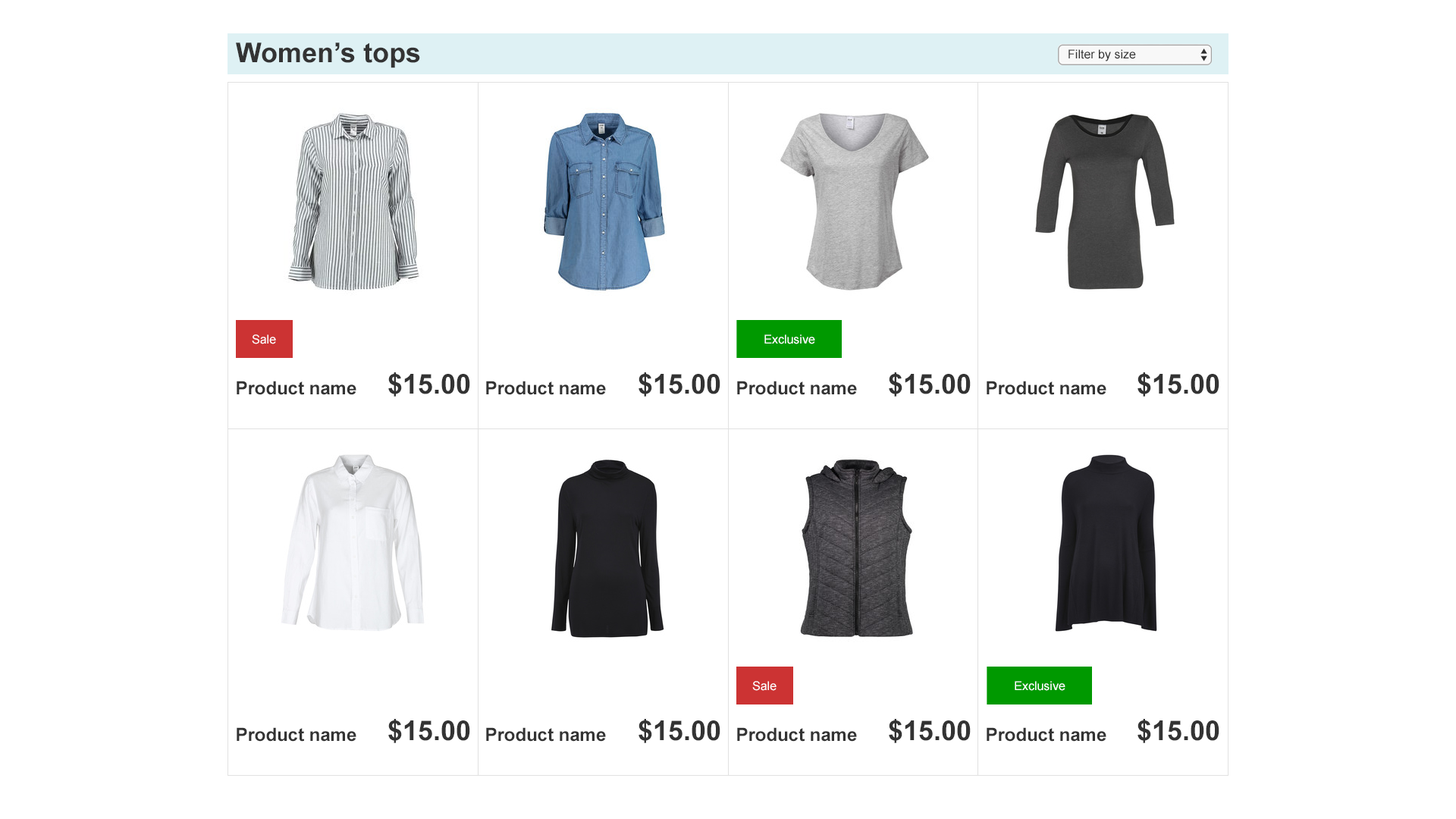
<style>
.page{position:relative;width:1456px;height:819px;background:#ffffff}
.page>*{position:absolute;margin:0}
.t1{font:27.3px "Arial-BoldMT";color:#333333}
.t2{font:12.1px "ArialMT";color:#333333}
.t3{font:12.1px "ArialMT";color:#ffffff}
.t4{font:18.2px "Arial-BoldMT";color:#333333}
</style>
<div class="page">
<p class="t1" style="left:236px;top:42px;width:184px;height:26px">Women’s tops</p>
<p class="t2" style="left:1068px;top:49px;width:68px;height:12px">Filter by size</p>
<p class="t3" style="left:252px;top:334px;width:24px;height:10px">Sale</p>
<p class="t3" style="left:764px;top:334px;width:51px;height:10px">Exclusive</p>
<p class="t1" style="left:388px;top:372px;width:82px;height:25px">$15.00</p>
<p class="t1" style="left:639px;top:372px;width:81px;height:25px">$15.00</p>
<p class="t1" style="left:889px;top:372px;width:82px;height:25px">$15.00</p>
<p class="t1" style="left:1137px;top:372px;width:82px;height:25px">$15.00</p>
<p class="t4" style="left:237px;top:381px;width:119px;height:14px">Product name</p>
<p class="t4" style="left:486px;top:381px;width:120px;height:14px">Product name</p>
<p class="t4" style="left:737px;top:381px;width:120px;height:14px">Product name</p>
<p class="t4" style="left:987px;top:381px;width:119px;height:14px">Product name</p>
<p class="t3" style="left:752px;top:681px;width:25px;height:10px">Sale</p>
<p class="t3" style="left:1015px;top:681px;width:50px;height:10px">Exclusive</p>
<p class="t1" style="left:388px;top:719px;width:82px;height:24px">$15.00</p>
<p class="t1" style="left:639px;top:719px;width:81px;height:24px">$15.00</p>
<p class="t1" style="left:889px;top:719px;width:82px;height:24px">$15.00</p>
<p class="t1" style="left:1137px;top:719px;width:82px;height:24px">$15.00</p>
<p class="t4" style="left:237px;top:727px;width:119px;height:15px">Product name</p>
<p class="t4" style="left:486px;top:727px;width:120px;height:15px">Product name</p>
<p class="t4" style="left:737px;top:727px;width:120px;height:15px">Product name</p>
<p class="t4" style="left:987px;top:727px;width:119px;height:15px">Product name</p>
</div>
